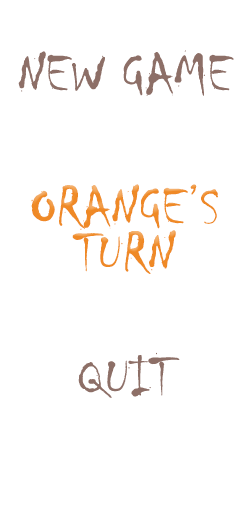
<style>
.page{position:relative;width:250px;height:510px;background:#ffffff}
.page>*{position:absolute;margin:0}
.t1{font:58.3px "Chiller-Regular";color:#8e6f67}
.t2{font:58.3px "Chiller-Regular";color:#ef8a26}
</style>
<div class="page">
<p class="t1" style="left:18px;top:50px;width:216px;height:46px">NEW GAME</p>
<p class="t2" style="left:31px;top:184px;width:187px;height:90px">ORANGE’S TURN</p>
<p class="t1" style="left:78px;top:352px;width:102px;height:46px">QUIT</p>
</div>
